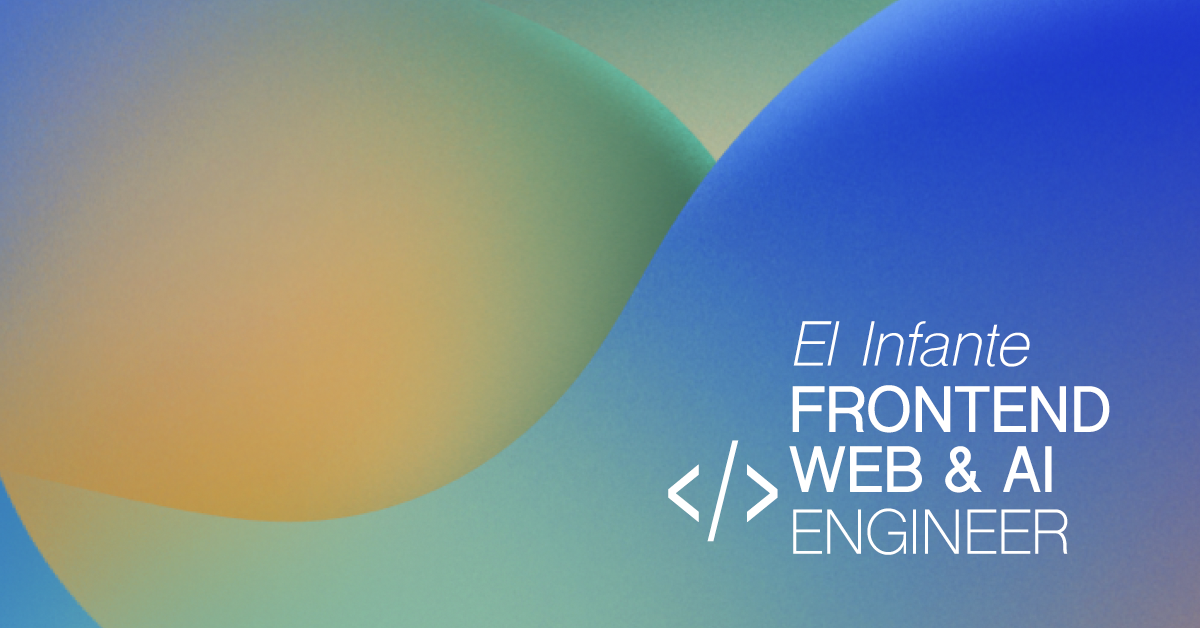
<style>
.page{position:relative;width:1200px;height:628px}
.page>*{position:absolute;margin:0}
.t1{font:60px "ShreeDev0714-Italic";letter-spacing:-0.01em;color:#ffffff}
.t2{font:60px "ShreeDev0714-Bold";letter-spacing:-0.01em;color:#ffffff;font-weight:bold}
.t3{font:106.9px "ShreeDev0714-Bold";letter-spacing:-0.01em;color:#ffffff;scale:0.72 1}
.t4{font:60px "ShreeDev0714";letter-spacing:-0.01em;color:#ffffff}
</style>
<div class="page">
<p class="t1" style="left:793px;top:321px;width:237px;height:46px">El Infante</p>
<p class="t2" style="left:792px;top:385px;width:318px;height:48px">FRONTEND</p>
<p class="t3" style="left:668px;top:440px;width:110px;height:102px">&lt;/&gt;</p>
<p class="t2" style="left:789px;top:446px;width:263px;height:47px">WEB &amp; AI</p>
<p class="t4" style="left:793px;top:508px;width:275px;height:47px">ENGINEER</p>
</div>
